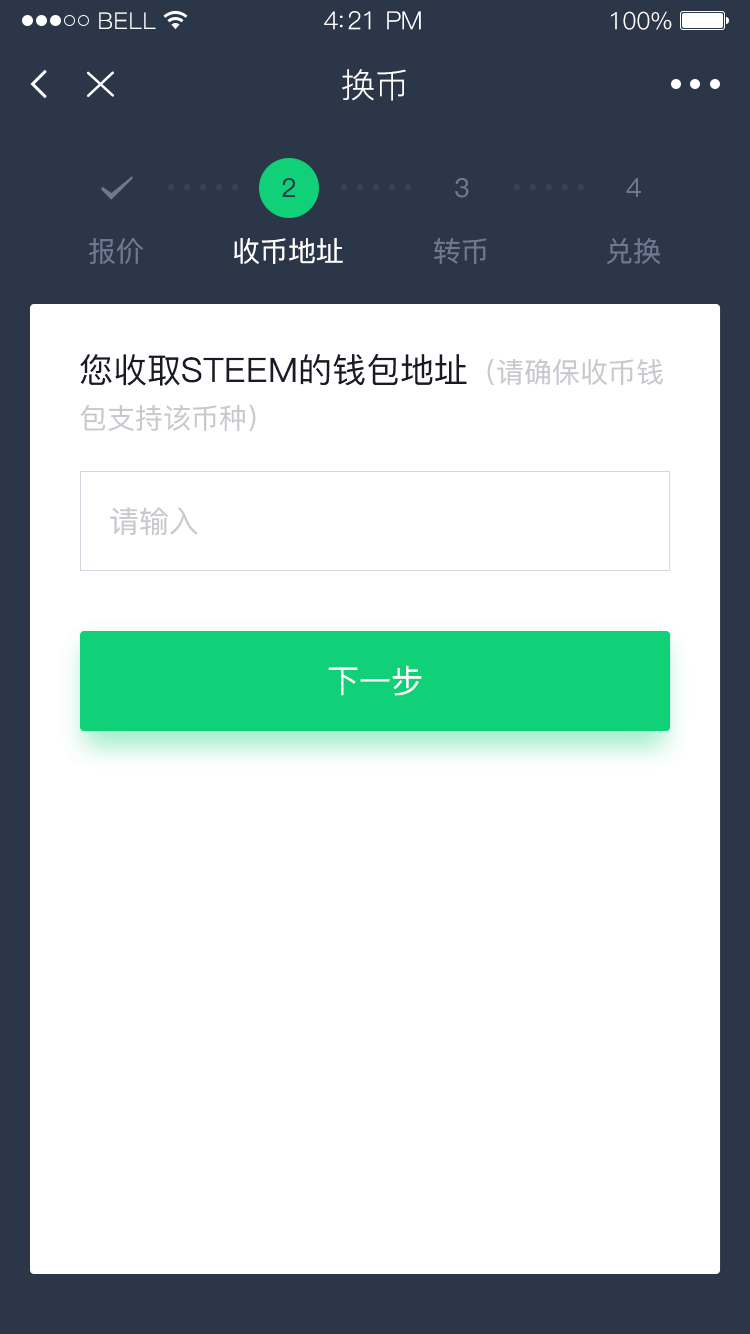
<style>
.page{position:relative;width:750px;height:1334px;background:#ffffff}
.page>*{position:absolute;margin:0}
.t1{font:23px "PingFang-SC-Regular";letter-spacing:0.02em;color:#ffffff}
.t2{font:25px "PingFang-SC-Regular";letter-spacing:-0.02em;color:#ffffff}
.t3{font:24px "PingFang-SC-Regular";letter-spacing:-0.02em;color:#ffffff}
.t4{font:34px "PingFang-SC-Regular";color:#ffffff}
.t5{font:26px "PingFang-SC-Medium";color:#2b3749}
.t6{font:26px "PingFang-SC-Medium";color:#6e7991}
.t7{font:28px "PingFang-SC-Medium";color:#6e7991}
.t8{font:28px "PingFang-SC-Medium";color:#ffffff}
.t9{font:28px/46px "PingFang-SC-Medium";color:#c7c9cd}
.t10{font:34px/46px "PingFang-SC-Medium";color:#181b23}
.t11{font:30px "PingFang-SC-Medium";color:#c7c9cd}
.t12{font:32px "PingFang-SC-Medium";color:#ffffff}
</style>
<div class="page">
<p class="t1" style="left:99px;top:12px;width:57px;height:17px">BELL</p>
<p class="t2" style="left:324px;top:11px;width:97px;height:19px">4:21 PM</p>
<p class="t3" style="left:611px;top:11px;width:61px;height:19px">100%</p>
<p class="t4" style="left:342px;top:69px;width:64px;height:32px">换币</p>
<p class="t5" style="left:282px;top:178px;width:13px;height:19px">2</p>
<p class="t6" style="left:455px;top:178px;width:14px;height:20px">3</p>
<p class="t6" style="left:626px;top:178px;width:15px;height:19px">4</p>
<p class="t7" style="left:89px;top:238px;width:54px;height:26px">报价</p>
<p class="t8" style="left:234px;top:238px;width:109px;height:26px">收币地址</p>
<p class="t7" style="left:434px;top:238px;width:53px;height:26px">转币</p>
<p class="t7" style="left:606px;top:238px;width:54px;height:26px">兑换</p>
<p class="t9" style="left:80px;top:354px;width:583px;height:77px"><span class="t10">您收取STEEM的钱包地址</span>（请确保收币钱<br>包支持该币种）</p>
<p class="t11" style="left:110px;top:507px;width:88px;height:28px">请输入</p>
<p class="t12" style="left:328px;top:665px;width:94px;height:31px">下一步</p>
</div>
